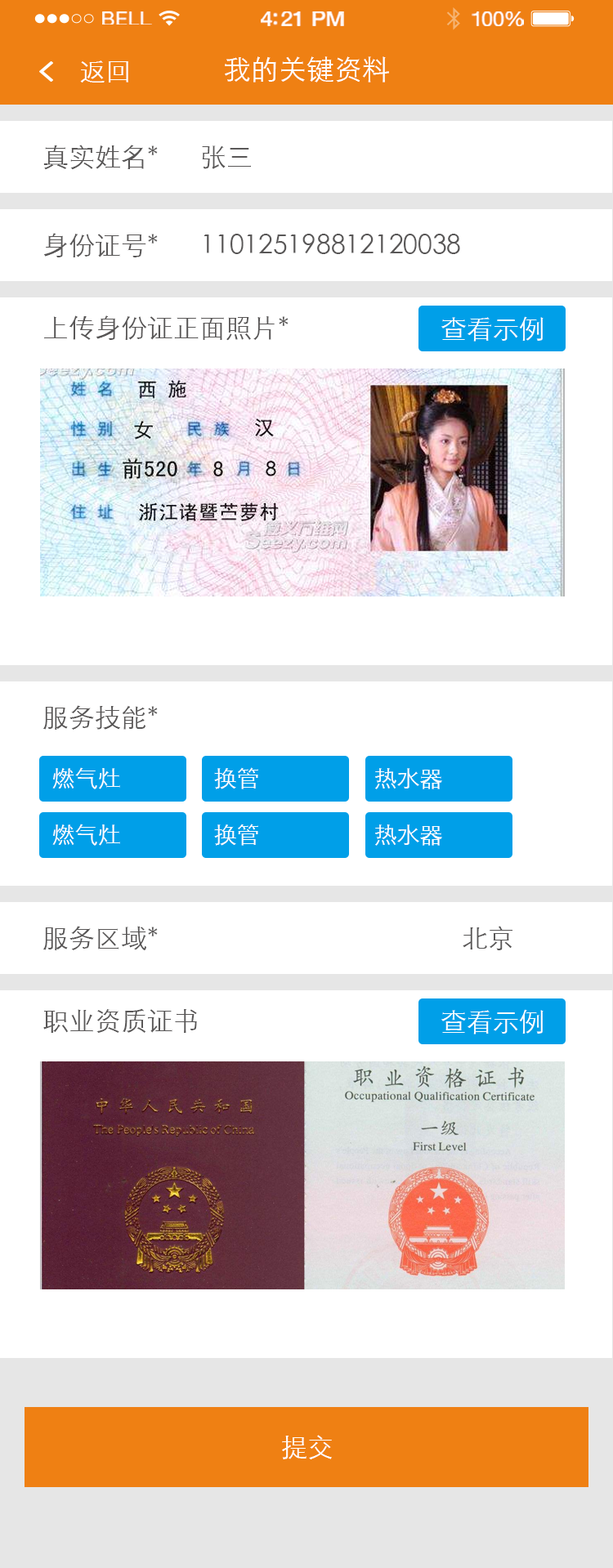
<style>
.page{position:relative;width:613px;height:1568px;background:#ffffff}
.page>*{position:absolute;margin:0}
.t1{font:19px "HelveticaNeue";letter-spacing:0.02em;color:#ffffff;scale:1.06 1}
.t2{font:20.7px "HelveticaNeue-Medium";letter-spacing:-0.02em;color:#ffffff;scale:1.06 1}
.t3{font:19.8px "HelveticaNeue";letter-spacing:-0.02em;color:#ffffff;scale:1.06 1}
.t4{font:26.1px "STXihei";color:#ffffff}
.t5{font:27.8px "STXihei";color:#ffffff}
.t6{font:26.1px "STXihei";color:#595757}
.t7{font:22.9px "STXihei";color:#ffffff}
</style>
<div class="page">
<p class="t1" style="left:102px;top:11px;width:50px;height:14px">BELL</p>
<p class="t2" style="left:261px;top:11px;width:83px;height:15px">4:21 PM</p>
<p class="t3" style="left:471px;top:11px;width:53px;height:15px">100%</p>
<p class="t4" style="left:80px;top:60px;width:48px;height:23px">返回</p>
<p class="t5" style="left:225px;top:56px;width:164px;height:27px">我的关键资料</p>
<p class="t6" style="left:43px;top:145px;width:115px;height:25px">真实姓名*</p>
<p class="t6" style="left:202px;top:145px;width:49px;height:24px">张三</p>
<p class="t6" style="left:43px;top:233px;width:115px;height:24px">身份证号*</p>
<p class="t6" style="left:203px;top:234px;width:257px;height:20px">110125198812120038</p>
<p class="t6" style="left:44px;top:315px;width:244px;height:26px">上传身份证正面照片*</p>
<p class="t4" style="left:441px;top:316px;width:102px;height:26px">查看示例</p>
<p class="t6" style="left:43px;top:705px;width:115px;height:25px">服务技能*</p>
<p class="t7" style="left:52px;top:767px;width:68px;height:22px">燃气灶</p>
<p class="t7" style="left:214px;top:767px;width:44px;height:22px">换管</p>
<p class="t7" style="left:375px;top:768px;width:67px;height:21px">热水器</p>
<p class="t7" style="left:52px;top:824px;width:68px;height:22px">燃气灶</p>
<p class="t7" style="left:214px;top:824px;width:44px;height:22px">换管</p>
<p class="t7" style="left:375px;top:824px;width:67px;height:22px">热水器</p>
<p class="t6" style="left:43px;top:926px;width:115px;height:24px">服务区域*</p>
<p class="t6" style="left:462px;top:926px;width:50px;height:24px">北京</p>
<p class="t6" style="left:43px;top:1008px;width:154px;height:25px">职业资质证书</p>
<p class="t4" style="left:441px;top:1009px;width:102px;height:25px">查看示例</p>
<p class="t4" style="left:282px;top:1435px;width:50px;height:24px">提交</p>
</div>
